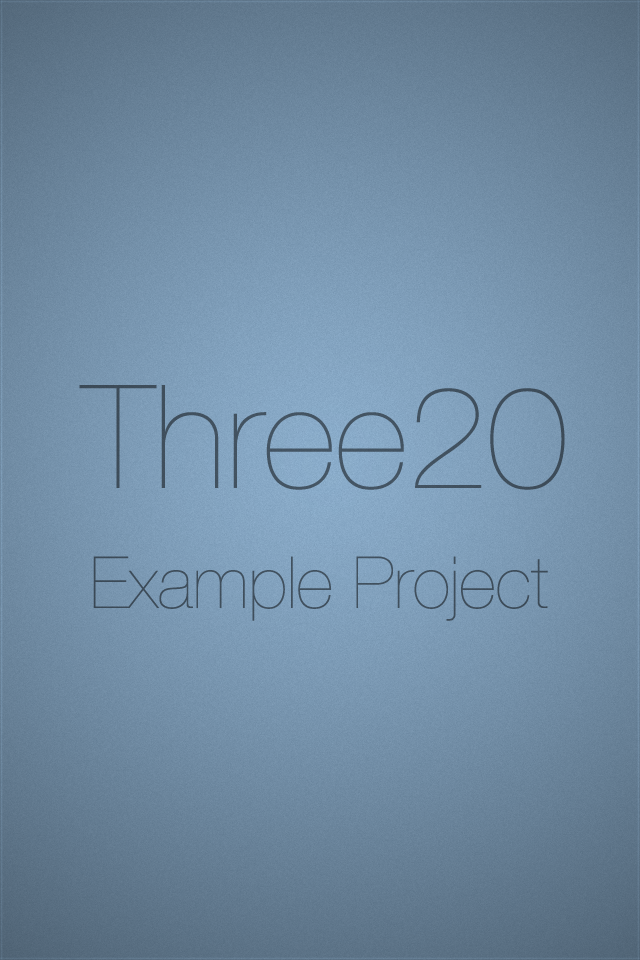
<style>
.page{position:relative;width:640px;height:960px}
.page>*{position:absolute;margin:0}
.t1{font:144px "HelveticaNeue-UltraLight";color:#41515f}
.t2{font:72px "HelveticaNeue-UltraLight";color:#3f4e5c}
</style>
<div class="page">
<p class="t1" style="left:79px;top:385px;width:486px;height:105px">Three20</p>
<p class="t2" style="left:93px;top:556px;width:455px;height:65px">Example Project</p>
</div>
